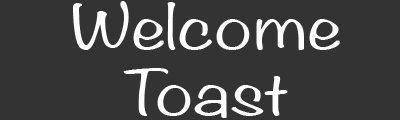
<style>
.page{position:relative;width:400px;height:120px;background:#333333}
.page>*{position:absolute;margin:0}
.t1{font:55px "Noteworthy-Light";color:#fffdfd;scale:1.5 1}
</style>
<div class="page">
<p class="t1" style="left:73px;top:1px;width:267px;height:117px;text-align:center">Welcome<br>Toast</p>
</div>
